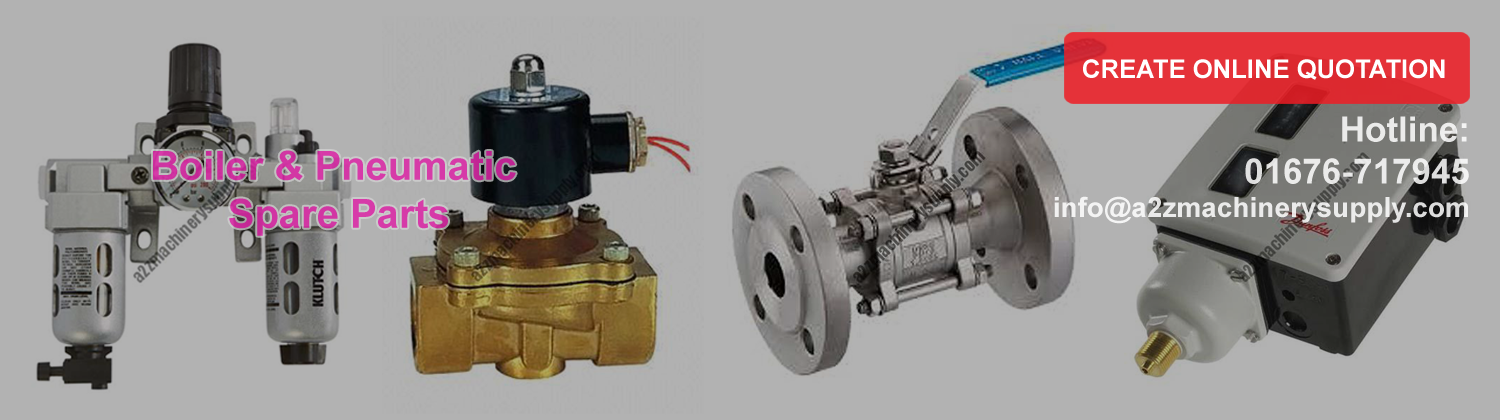
<style>
.page{position:relative;width:1500px;height:420px;background:#b2b2b2}
.page>*{position:absolute;margin:0}
.t1{font:25.6px "Arial-BoldMT";color:#ffffff}
.t2{font:28px "Arial-BoldMT";color:#ffffff}
.t3{font:35px "Arial-BoldMT";color:#ffffff}
.t4{font:40px "Arial-BoldMT";color:#d236a3}
</style>
<div class="page">
<p class="t1" style="left:1083px;top:59px;width:362px;height:21px">CREATE ONLINE QUOTATION</p>
<p class="t2" style="left:1054px;top:116px;width:415px;height:108px;text-align:right;opacity:0.85"><span class="t3">Hotline:<br>01676-717945<br></span>info@a2zmachinerysupply.com</p>
<p class="t4" style="left:153px;top:150px;width:363px;height:86px;text-align:center">Boiler &amp; Pneumatic <br>Spare Parts</p>
</div>
